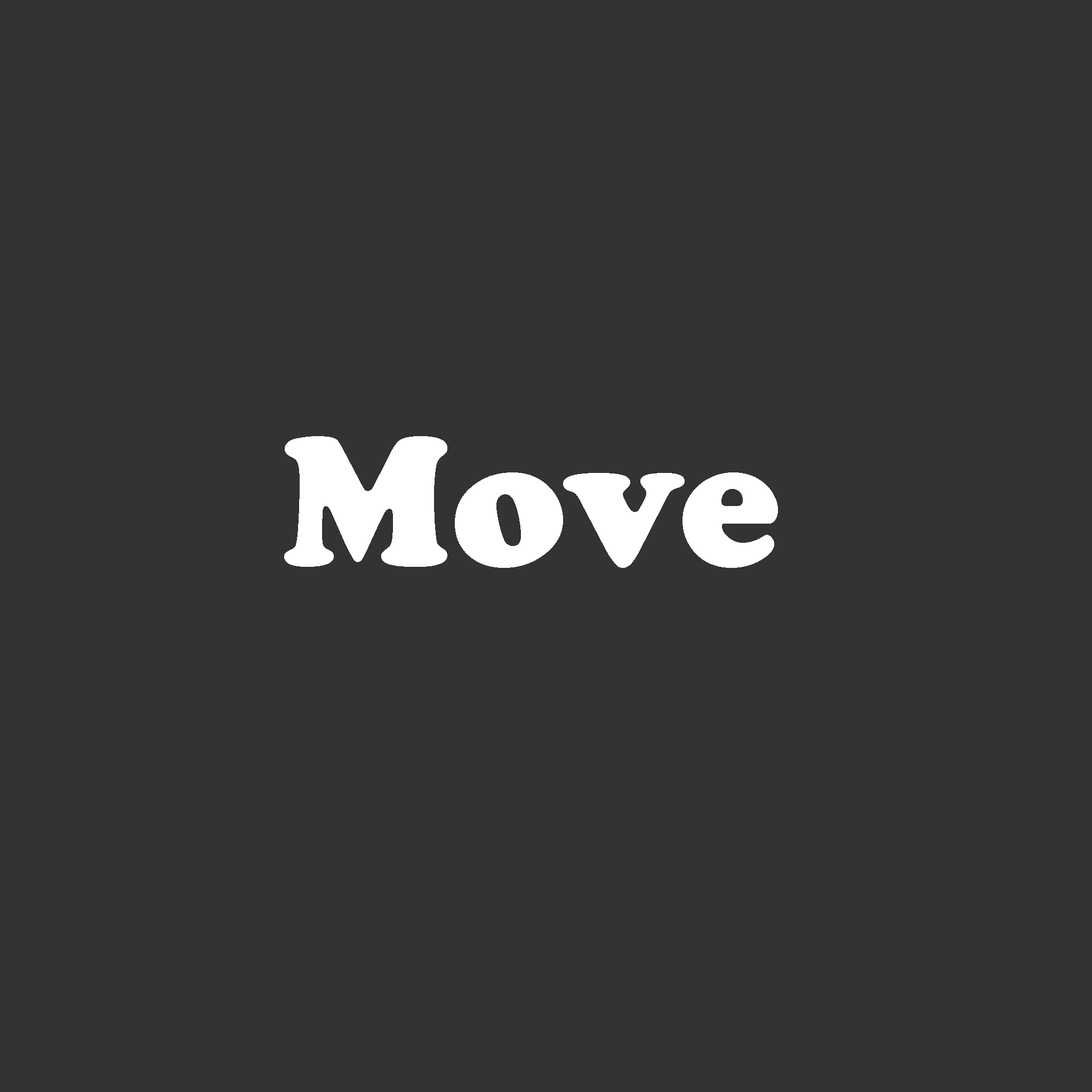
<style>
.page{position:relative;width:1092px;height:1092px;background:#333333}
.page>*{position:absolute;margin:0}
.t1{font:190.4px "CooperBlack";letter-spacing:0.01em;color:#ffffff}
</style>
<div class="page">
<p class="t1" style="left:284px;top:436px;width:494px;height:132px">Move</p>
</div>
